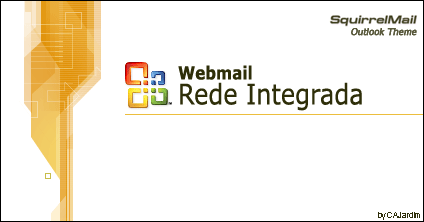
<style>
.page{position:relative;width:424px;height:222px;background:#ffffff}
.page>*{position:absolute;margin:0}
.t1{font:9.2px "Tahoma";color:#5a5a3d;font-weight:bold;font-style:italic}
.t2{font:28.3px/25px "Verdana";color:#2e2e09;scale:0.85 1}
.t3{font:18px/25px "Verdana-Bold";color:#2e2e09;scale:0.85 1}
.t4{font:8px "ArialMT";color:#2e2e09}
</style>
<div class="page">
<p class="t1" style="left:351px;top:28px;width:66px;height:8px">Outlook Theme</p>
<p class="t2" style="left:178px;top:65px;width:184px;height:46px"><span class="t3">Webmail<br></span>Rede Integrada</p>
<p class="t4" style="left:378px;top:212px;width:42px;height:8px">by CAJardim</p>
</div>
